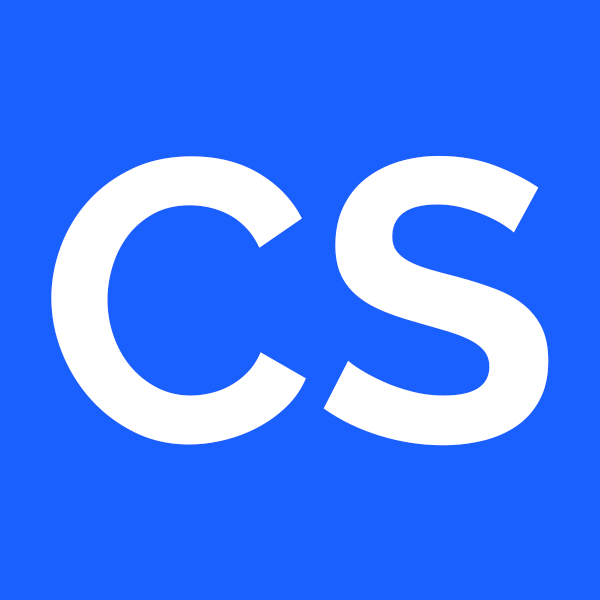
<style>
.page{position:relative;width:600px;height:600px;background:#1a60ff}
.page>*{position:absolute;margin:0}
.t1{font:400px "Raleway-Bold";letter-spacing:0.004em;color:#ffffff}
</style>
<div class="page">
<p class="t1" style="left:51px;top:156px;width:498px;height:290px">CS</p>
</div>
